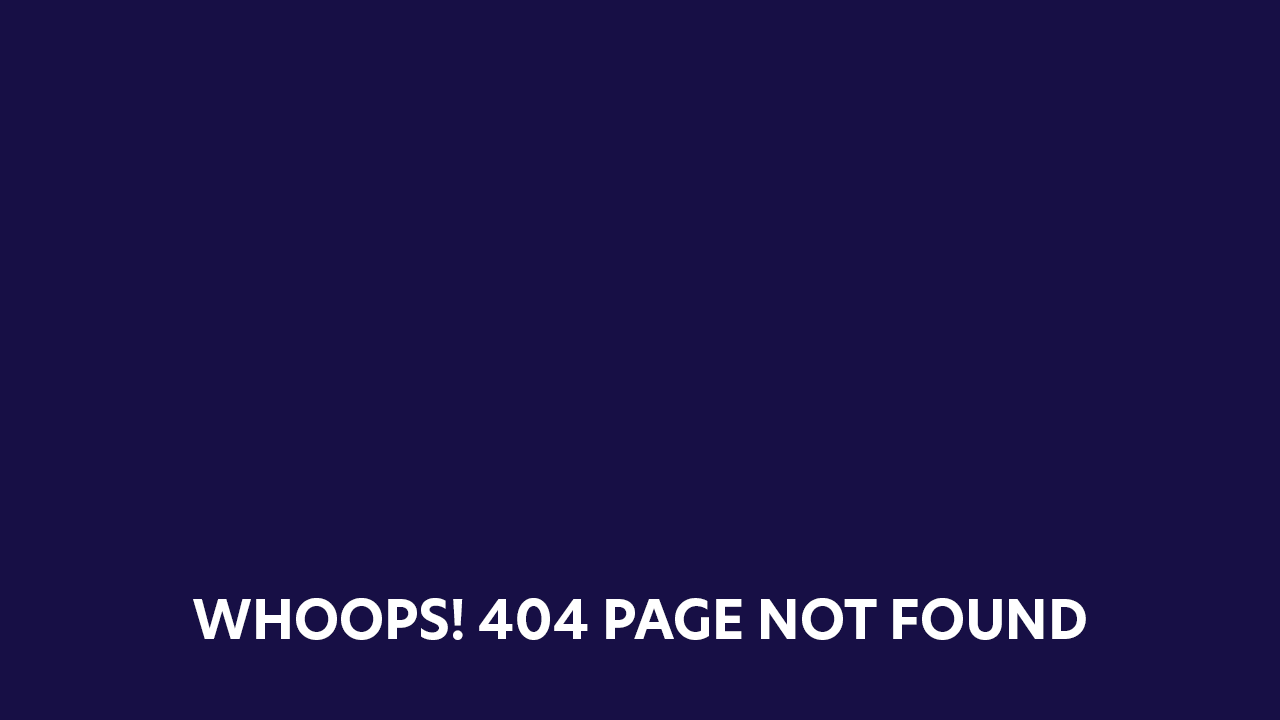
<style>
.page{position:relative;width:1280px;height:720px;background:#170f45}
.page>*{position:absolute;margin:0}
.t1{font:53px "HeroNew-Bold";color:#ffffff}
</style>
<div class="page">
<p class="t1" style="left:193px;top:598px;width:893px;height:42px">WHOOPS! 404 PAGE NOT FOUND</p>
</div>
